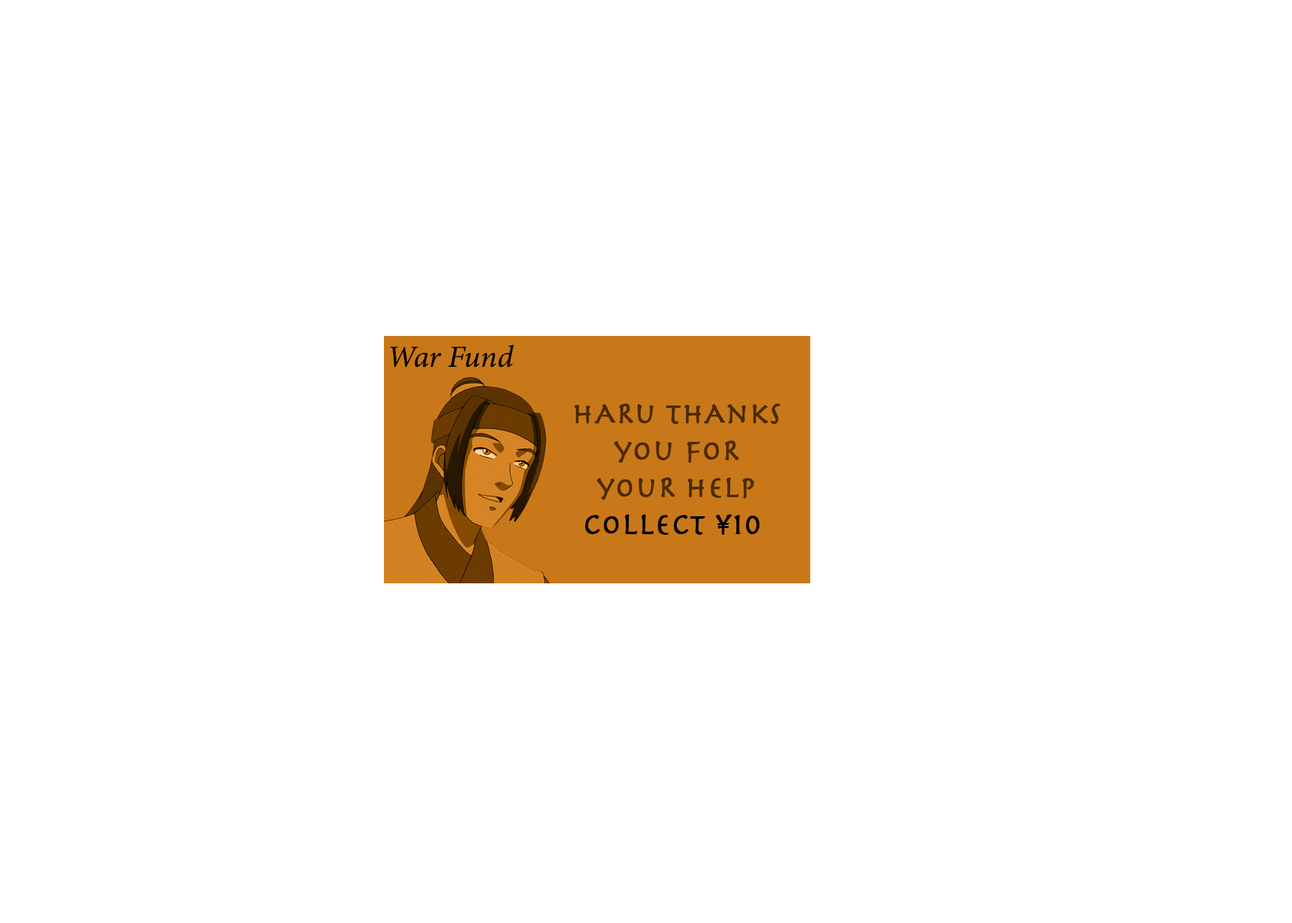
<style>
.page{position:relative;width:1292px;height:923px;background:#ffffff}
.page>*{position:absolute;margin:0}
.t1{font:30.8px "MinionConceptItalic-MediumItalic";color:#000000;font-weight:bold}
.t2{font:30.8px "Herculanum";color:#4d310e;font-weight:bold}
.t3{font:30.8px "Herculanum";color:#000000;font-weight:bold}
</style>
<div class="page">
<p class="t1" style="left:390px;top:345px;width:124px;height:22px">War Fund</p>
<p class="t2" style="left:574px;top:404px;width:206px;height:131px;text-align:center">hARu thAnks<br>you foR<br>youR help<br><span class="t3">collect ¥10</span></p>
</div>
